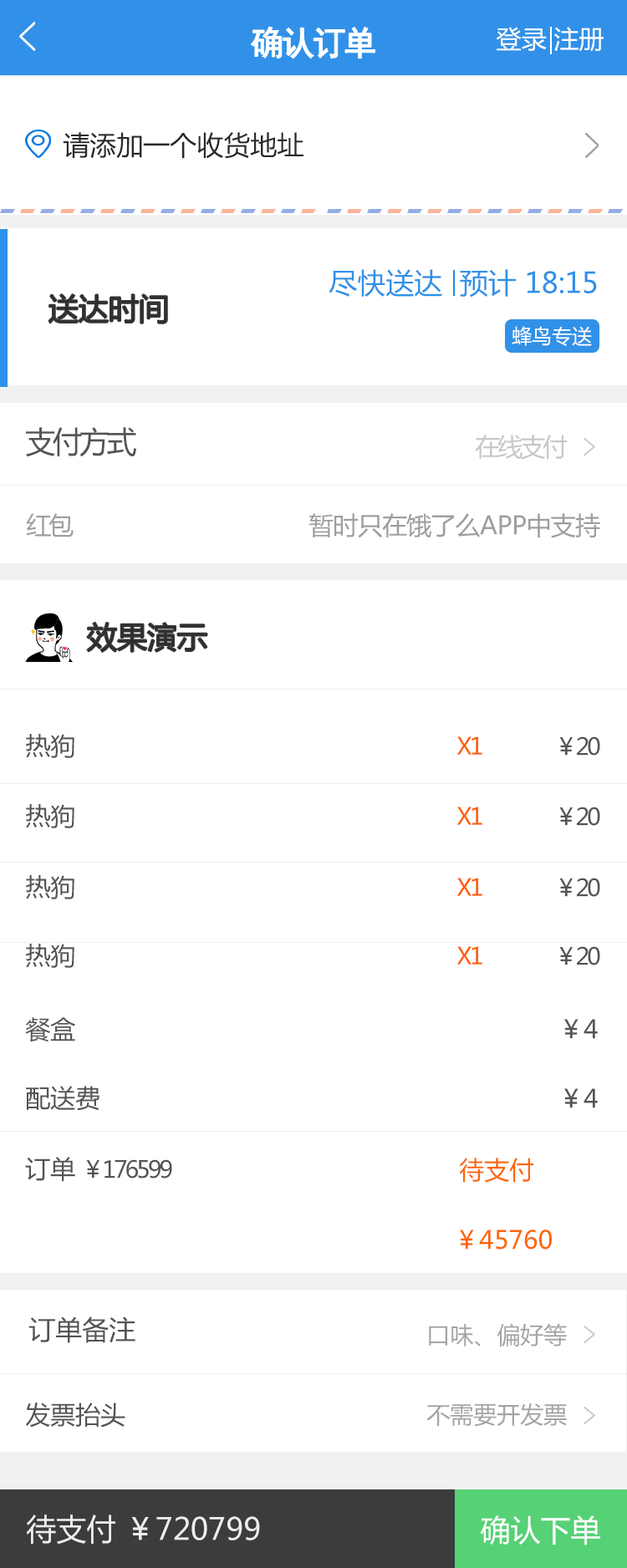
<style>
.page{position:relative;width:627px;height:1568px;background:#ffffff}
.page>*{position:absolute;margin:0}
.t1{font:33.4px "SimHei";letter-spacing:-0.1em;color:#ffffff;font-weight:bold}
.t2{font:25.1px "MicrosoftYaHei";color:#ffffff}
.t3{font:26.7px "MicrosoftYaHei";color:#2a2a2a}
.t4{font:28.4px "MicrosoftYaHei";color:#3191e8}
.t5{font:30.1px "MicrosoftYaHei";color:#2b2b2b}
.t6{font:20.1px "MicrosoftYaHei";color:#ffffff}
.t7{font:30.1px "MicrosoftYaHei";letter-spacing:-0.1em;color:#545454}
.t8{font:25.1px "MicrosoftYaHei";letter-spacing:-0.1em;color:#c8c8c8}
.t9{font:25.1px "MicrosoftYaHei";letter-spacing:-0.1em;color:#9e9e9e}
.t10{font:25.1px "MicrosoftYaHei";letter-spacing:-0.025em;color:#9e9e9e}
.t11{font:25.1px "MicrosoftYaHei";color:#545454}
.t12{font:23.4px "MicrosoftYaHei";letter-spacing:-0.1em;color:#ff5e02}
.t13{font:23.4px "MicrosoftYaHei";letter-spacing:-0.1em;color:#545454}
.t14{font:25.1px "MicrosoftYaHei";color:#fe6500}
.t15{font:26.7px "MicrosoftYaHei";color:#545454}
.t16{font:23.4px "MicrosoftYaHei";color:#a4a4a4}
.t17{font:30.1px "MicrosoftYaHei";color:#ededed}
.t18{font:30.1px "MicrosoftYaHei";color:#ffffff}
</style>
<div class="page">
<p class="t1" style="left:251px;top:27px;width:124px;height:32px">确认订单</p>
<p class="t2" style="left:496px;top:27px;width:107px;height:25px">登录 注册</p>
<p class="t3" style="left:63px;top:132px;width:240px;height:27px">请添加一个收货地址</p>
<p class="t4" style="left:328px;top:269px;width:269px;height:29px">尽快送达  预计 18:15</p>
<p class="t5" style="left:48px;top:294px;width:119px;height:29px">送达时间</p>
<p class="t6" style="left:512px;top:326px;width:80px;height:20px">蜂鸟专送</p>
<p class="t7" style="left:26px;top:427px;width:110px;height:30px">支付方式</p>
<p class="t8" style="left:475px;top:435px;width:93px;height:25px">在线支付</p>
<p class="t9" style="left:26px;top:513px;width:48px;height:24px">红包</p>
<p class="t10" style="left:308px;top:513px;width:292px;height:25px">暂时只在饿了么APP中支持</p>
<p class="t5" style="left:87px;top:622px;width:120px;height:30px">效果演示</p>
<p class="t11" style="left:26px;top:734px;width:48px;height:24px">热狗</p>
<p class="t12" style="left:456px;top:736px;width:26px;height:19px">X1</p>
<p class="t13" style="left:559px;top:736px;width:41px;height:20px">￥20</p>
<p class="t11" style="left:26px;top:804px;width:48px;height:24px">热狗</p>
<p class="t12" style="left:456px;top:807px;width:26px;height:18px">X1</p>
<p class="t13" style="left:559px;top:807px;width:41px;height:19px">￥20</p>
<p class="t11" style="left:26px;top:875px;width:48px;height:24px">热狗</p>
<p class="t12" style="left:456px;top:878px;width:26px;height:18px">X1</p>
<p class="t13" style="left:559px;top:878px;width:41px;height:19px">￥20</p>
<p class="t11" style="left:26px;top:944px;width:48px;height:24px">热狗</p>
<p class="t12" style="left:456px;top:946px;width:26px;height:19px">X1</p>
<p class="t13" style="left:559px;top:946px;width:41px;height:19px">￥20</p>
<p class="t11" style="left:25px;top:1017px;width:50px;height:25px">餐盒</p>
<p class="t11" style="left:564px;top:1019px;width:34px;height:20px">￥4</p>
<p class="t11" style="left:26px;top:1086px;width:73px;height:25px">配送费</p>
<p class="t11" style="left:564px;top:1088px;width:34px;height:20px">￥4</p>
<p class="t11" style="left:25px;top:1157px;width:50px;height:25px">订单</p>
<p class="t14" style="left:459px;top:1158px;width:75px;height:25px">待支付</p>
<p class="t13" style="left:86px;top:1159px;width:86px;height:20px">￥176599</p>
<p class="t14" style="left:460px;top:1229px;width:92px;height:21px">￥45760</p>
<p class="t15" style="left:28px;top:1316px;width:107px;height:27px">订单备注</p>
<p class="t16" style="left:429px;top:1323px;width:138px;height:24px">口味、偏好等</p>
<p class="t11" style="left:25px;top:1403px;width:100px;height:25px">发票抬头</p>
<p class="t16" style="left:426px;top:1403px;width:141px;height:24px">不需要开发票</p>
<p class="t17" style="left:26px;top:1515px;width:234px;height:30px">待支付 ￥720799</p>
<p class="t18" style="left:480px;top:1515px;width:120px;height:30px">确认下单</p>
</div>
